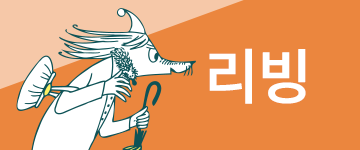
<style>
.page{position:relative;width:360px;height:150px;background:#eb863e}
.page>*{position:absolute;margin:0}
.t1{font:60px "NotoSansKR-Medium";letter-spacing:-0.06em;color:#ffffff;font-weight:bold}
</style>
<div class="page">
<p class="t1" style="left:209px;top:48px;width:97px;height:56px">리빙</p>
</div>
